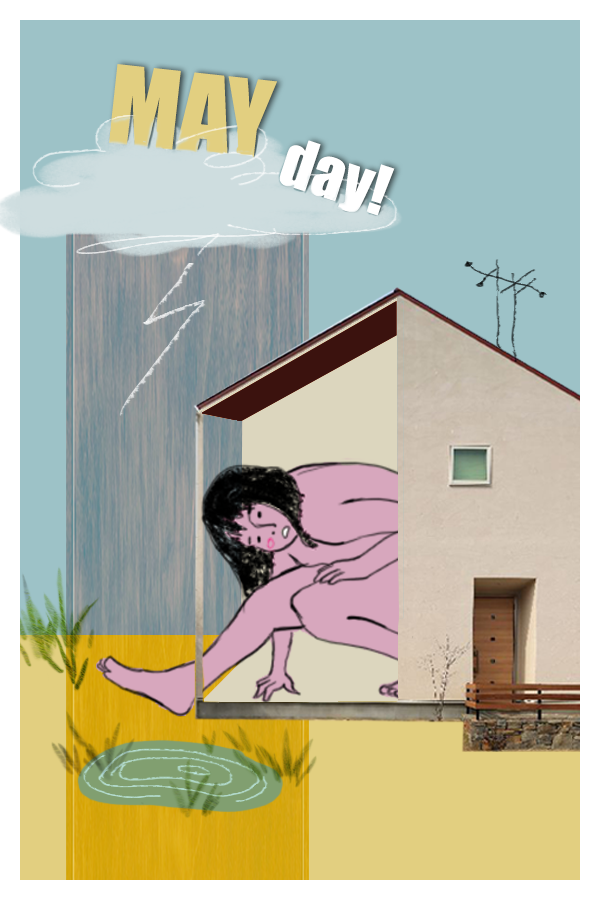
<style>
.page{position:relative;width:600px;height:900px;background:#9dc2c7}
.page>*{position:absolute;margin:0}
.t1{font:100px "Impact";color:#e2cf80}
.t2{font:62.6px "Impact";color:#ffffff}
</style>
<div class="page">
<p class="t1" style="left:109px;top:64px;width:168px;height:95px;rotate:6deg">MAY</p>
<p class="t2" style="left:279px;top:140px;width:116px;height:76px;rotate:18deg">day!</p>
</div>
